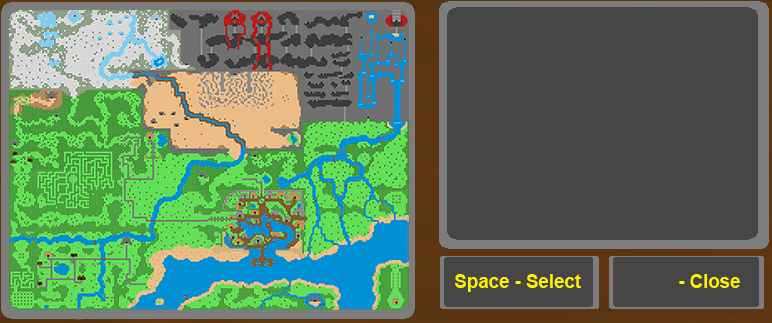
<style>
.page{position:relative;width:772px;height:323px;background:#464646}
.page>*{position:absolute;margin:0}
.t1{font:18.7px "Arial-BoldMT";color:#fff200}
</style>
<div class="page">
<p class="t1" style="left:454px;top:274px;width:127px;height:18px">Space - Select</p>
<p class="t1" style="left:679px;top:274px;width:61px;height:14px">- Close</p>
</div>
